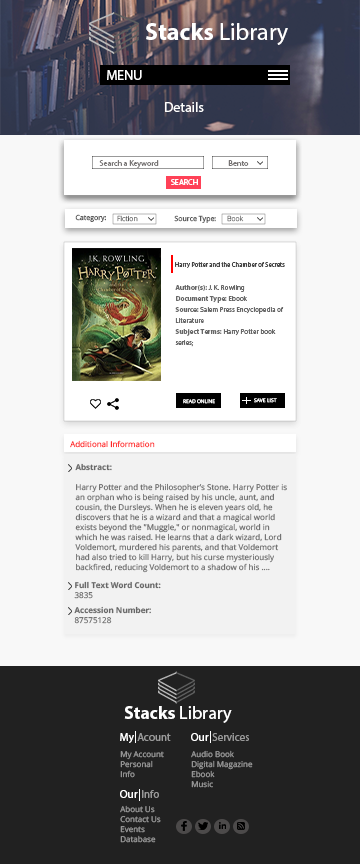
<style>
.page{position:relative;width:360px;height:864px;background:#212121}
.page>*{position:absolute;margin:0}
.t1{font:24px "MyriadPro-Regular";color:#ffffff}
.t2{font:24px "MyriadPro-Bold";color:#ffffff}
.t3{font:14px "MyriadPro-Regular";color:#ffffff}
.t4{font:8px "MyriadPro-Regular";color:#777474}
.t5{font:8px "MyriadPro-Regular";color:#ffffff}
.t6{font:7px "OpenSans";color:#5a5a5a}
.t7{font:7px "OpenSans-Light";color:#5a5a5a}
.t8{font:7px "OpenSans-Light"}
.t9{font:6.5px "MyriadPro-Regular";color:#464646}
.t10{font:7px/11px "MyriadPro-Regular";color:#686868}
.t11{font:7px/11px "MyriadPro-Bold";color:#686868}
.t12{font:5px "OpenSans";color:#ffffff}
.t13{font:8px "OpenSans"}
.t14{font:8px/10px "OpenSans";color:#686868}
.t15{font:8px/10px "OpenSans-Bold";color:#686868}
.t16{font:18px "MyriadPro-Regular";color:#ffffff}
.t17{font:18px "MyriadPro-Bold";color:#ffffff}
.t18{font:11px "MyriadPro-Regular";color:#ffffff}
.t19{font:11px "MyriadPro-Regular";color:#999999}
.t20{font:8px/10px "OpenSans"}
</style>
<div class="page">
<p class="t1" style="left:146px;top:23px;width:142px;height:22px"><span class="t2">Stacks</span> Library</p>
<p class="t3" style="left:107px;top:70px;width:35px;height:10px">MENU</p>
<p class="t3" style="left:165px;top:102px;width:39px;height:10px">Details</p>
<p class="t4" style="left:99px;top:160px;width:60px;height:8px">Search a Keyword</p>
<p class="t4" style="left:228px;top:160px;width:21px;height:6px">Bento</p>
<p class="t5" style="left:171px;top:179px;width:27px;height:6px">SEARCH</p>
<p class="t6" style="left:75px;top:214px;width:31px;height:8px">Category:</p>
<p class="t7" style="left:117px;top:215px;width:21px;height:7px">Fiction</p>
<p class="t6" style="left:174px;top:215px;width:42px;height:8px">Source Type:</p>
<p class="t8" style="left:227px;top:215px;width:17px;height:7px">Book</p>
<p class="t9" style="left:175px;top:262px;width:110px;height:6px">Harry Potter and the Chamber of Secrets</p>
<p class="t10" style="left:175px;top:285px;width:109px;height:62px"><span class="t11">Author(s):</span> J. K. Rowling<br><span class="t11">Document Type:</span> Ebook<br><span class="t11">Source: </span>Salem Press Encyclopedia of <br>Literature<br><span class="t11">Subject Terms:</span> Harry Potter book series; <br>Rowling, J. K., 1965</p>
<p class="t12" style="left:183px;top:399px;width:32px;height:5px">READ ONLINE</p>
<p class="t12" style="left:254px;top:398px;width:23px;height:5px">SAVE LIST</p>
<p class="t13" style="left:70px;top:440px;width:85px;height:8px">Additional Information</p>
<p class="t14" style="left:75px;top:463px;width:212px;height:110px"><span class="t15">Abstract:<br></span><br>Harry Potter and the Philosopher’s Stone. Harry Potter is an orphan who is being raised by his uncle, aunt, and cousin, the Dursleys. When he is eleven years old, he discovers that he is a wizard and that a magical world exists beyond the "Muggle," or nonmagical, world in which he was raised. He learns that a dark wizard, Lord Voldemort, murdered his parents, and that Voldemort had also tried to kill Harry, but his curse mysteriously backfired, reducing Voldemort to a shadow of his ....</p>
<p class="t15" style="left:74px;top:581px;width:87px;height:18px">Full Text Word Count:<br><span class="t14">3835</span></p>
<p class="t15" style="left:74px;top:606px;width:77px;height:18px">Accession Number:<br><span class="t14">87575128</span></p>
<p class="t16" style="left:124px;top:706px;width:108px;height:17px"><span class="t17">Stacks</span> Library</p>
<p class="t18" style="left:120px;top:733px;width:14px;height:10px">My</p>
<p class="t19" style="left:137px;top:733px;width:34px;height:8px">Acount</p>
<p class="t18" style="left:191px;top:733px;width:18px;height:8px">Our</p>
<p class="t19" style="left:212px;top:733px;width:37px;height:8px">Services</p>
<p class="t20" style="left:191px;top:750px;width:62px;height:38px">Audio Book<br>Digital Magazine<br>Ebook<br>Music</p>
<p class="t20" style="left:120px;top:751px;width:44px;height:27px">My Account<br>Personal Info<br>My Saved List</p>
<p class="t18" style="left:120px;top:790px;width:18px;height:8px">Our</p>
<p class="t19" style="left:142px;top:790px;width:17px;height:8px">Info</p>
<p class="t20" style="left:120px;top:805px;width:41px;height:38px">About Us<br>Contact Us<br>Events<br>Database</p>
</div>
